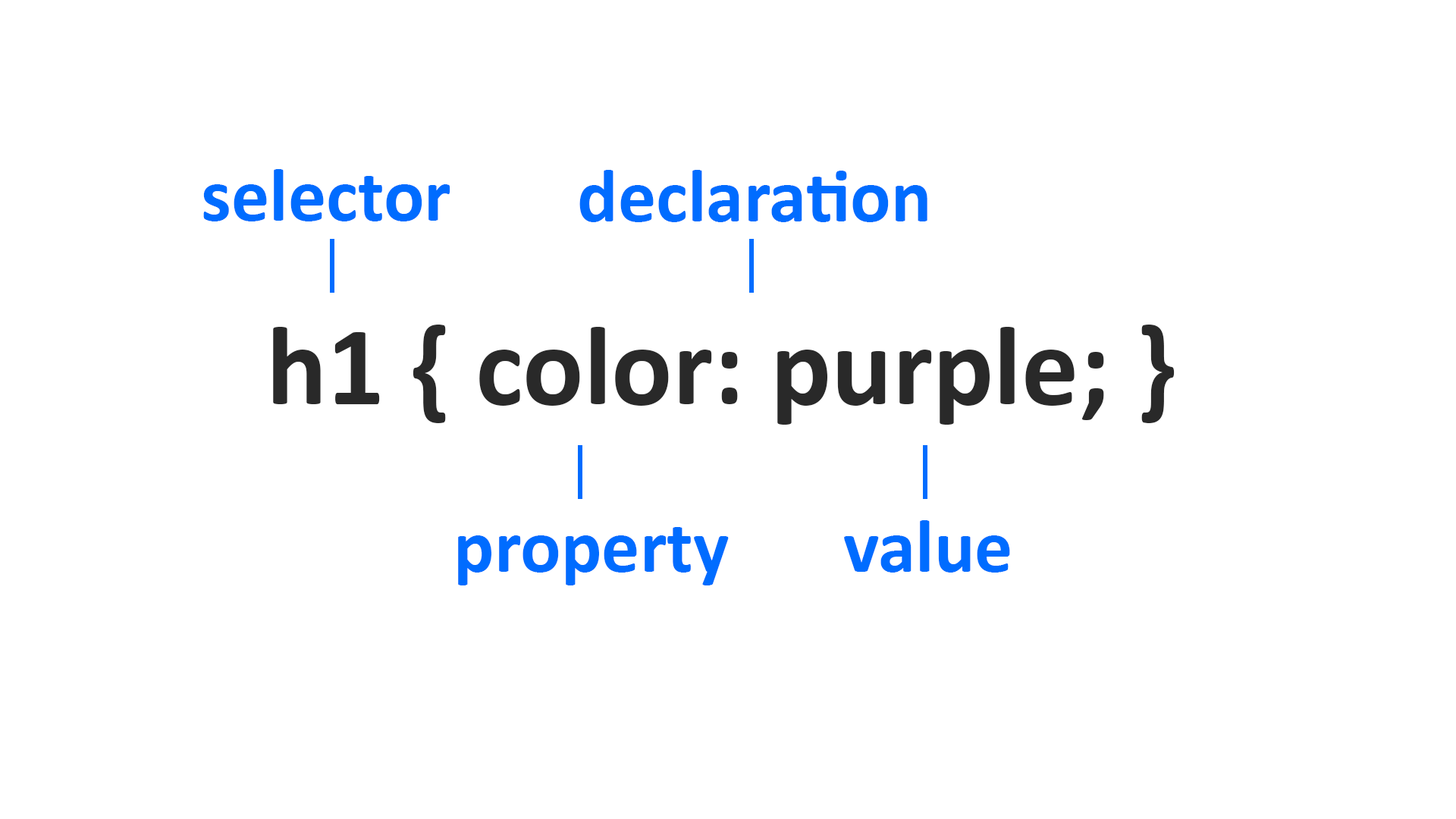
<style>
.page{position:relative;width:1456px;height:819px;background:#ffffff}
.page>*{position:absolute;margin:0}
.t1{font:75.8px "Calibri-Bold";color:#006cff}
.t2{font:113.7px "Calibri-Bold";color:#292929}
</style>
<div class="page">
<p class="t1" style="left:203px;top:169px;width:247px;height:52px">selector</p>
<p class="t1" style="left:579px;top:170px;width:348px;height:52px">declaration</p>
<p class="t2" style="left:273px;top:325px;width:902px;height:100px">h1 { color: purple; }</p>
<p class="t1" style="left:844px;top:520px;width:166px;height:53px">value</p>
<p class="t1" style="left:458px;top:527px;width:271px;height:58px">property</p>
</div>
